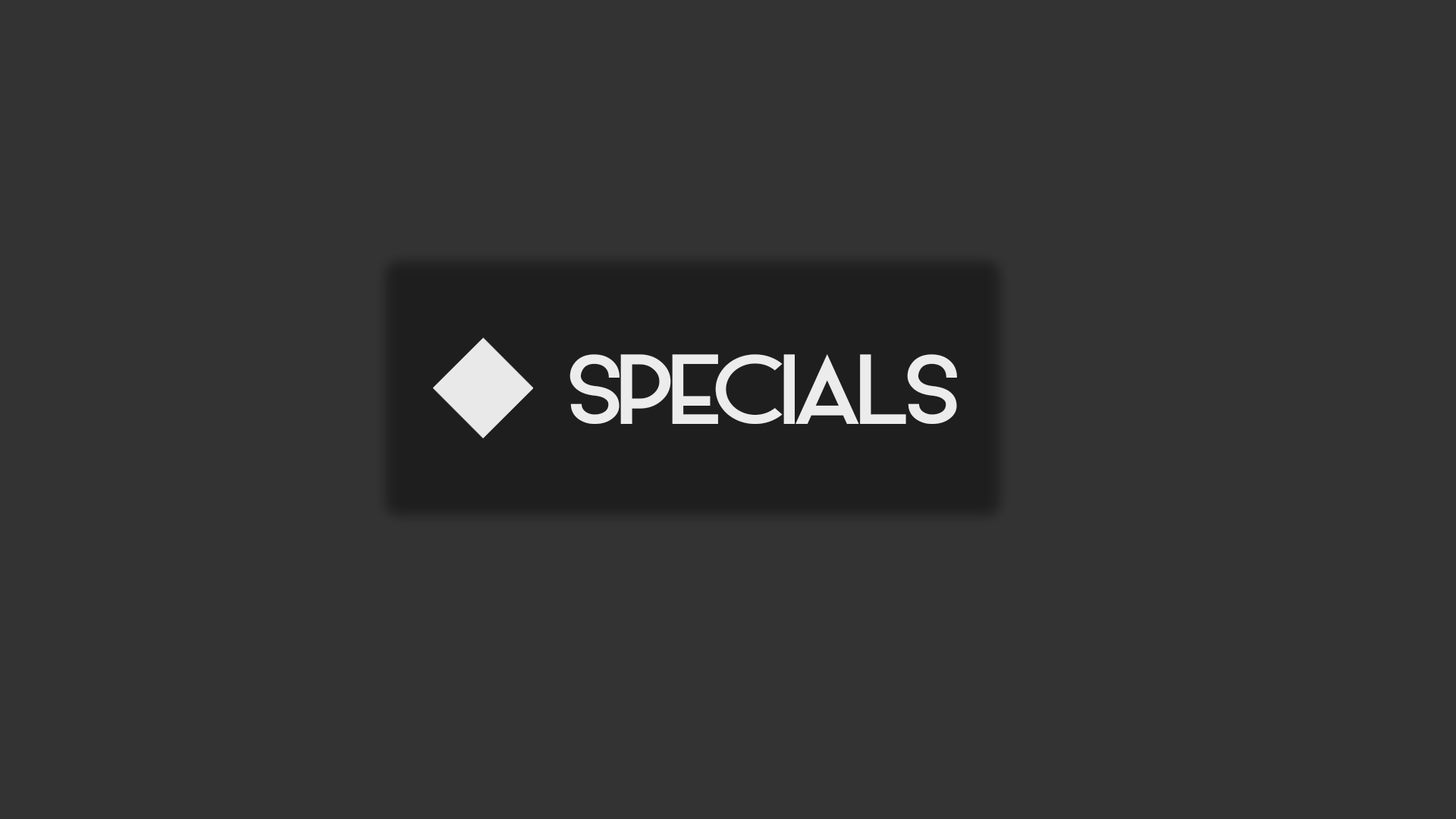
<style>
.page{position:relative;width:1456px;height:819px;background:#333333}
.page>*{position:absolute;margin:0}
.t1{font:86.9px "AlpacaScarlettDemo";letter-spacing:-0.04em;color:#ffffff;scale:1.13 1}
</style>
<div class="page">
<p class="t1" style="left:570px;top:354px;width:387px;height:70px;opacity:0.9">SPECIALS</p>
</div>
